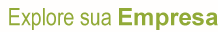
<style>
.page{position:relative;width:218px;height:32px;background:#fffefd}
.page>*{position:absolute;margin:0}
.t1{font:24px "ArialNarrow";color:#91aa37}
.t2{font:24px "Arial-BoldMT";color:#91aa37}
</style>
<div class="page">
<p class="t1" style="left:9px;top:8px;width:209px;height:22px">Explore sua <span class="t2">Empresa</span></p>
</div>
